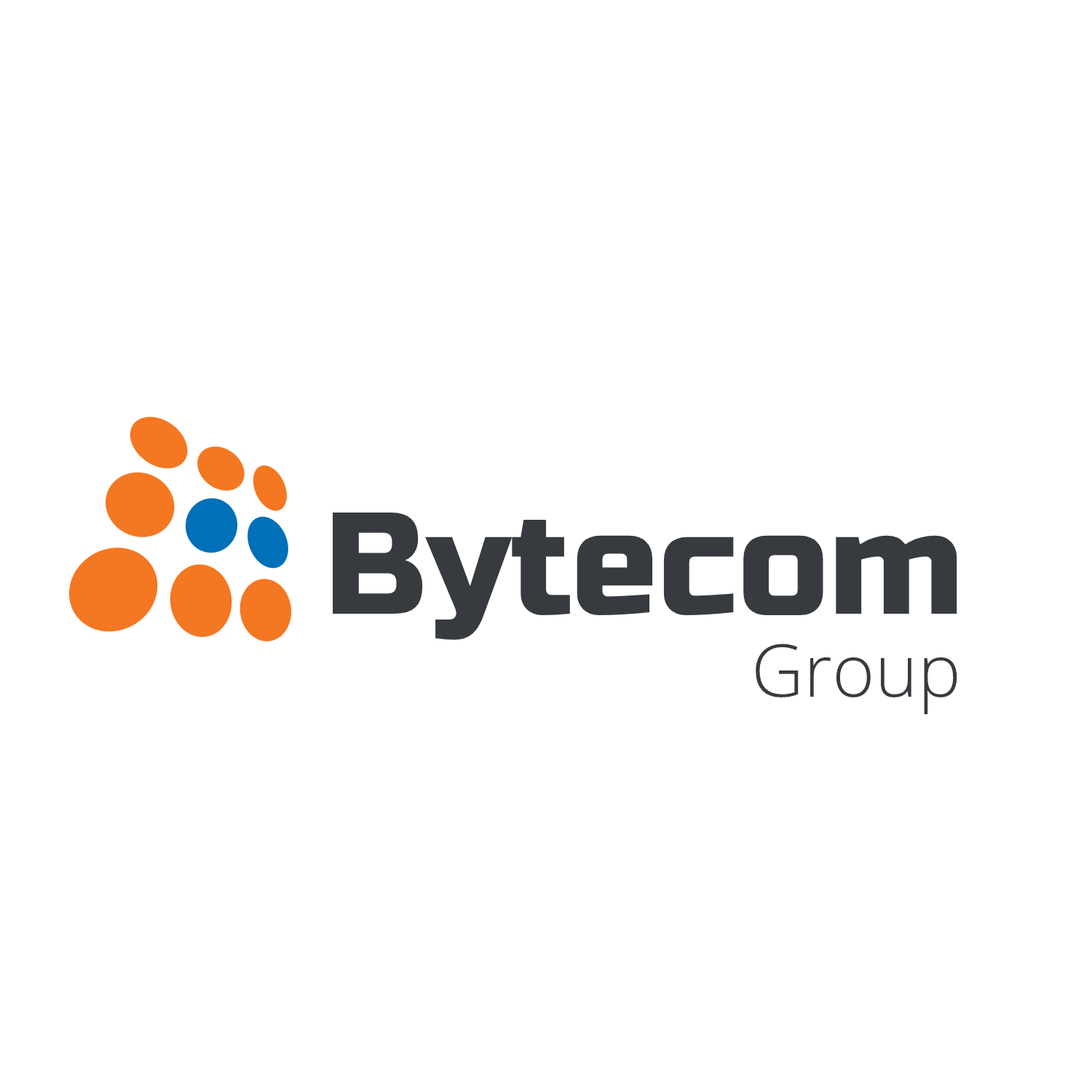
<style>
.page{position:relative;width:1092px;height:1092px;background:#ffffff}
.page>*{position:absolute;margin:0}
.t1{font:144.6px "RussoOne-Regular";color:#373b3f}
.t2{font:72.8px "OpenSans-Light";color:#373b3f}
</style>
<div class="page">
<p class="t1" style="left:333px;top:512px;width:624px;height:128px">Bytecom</p>
<p class="t2" style="left:756px;top:644px;width:201px;height:71px">Group</p>
</div>
